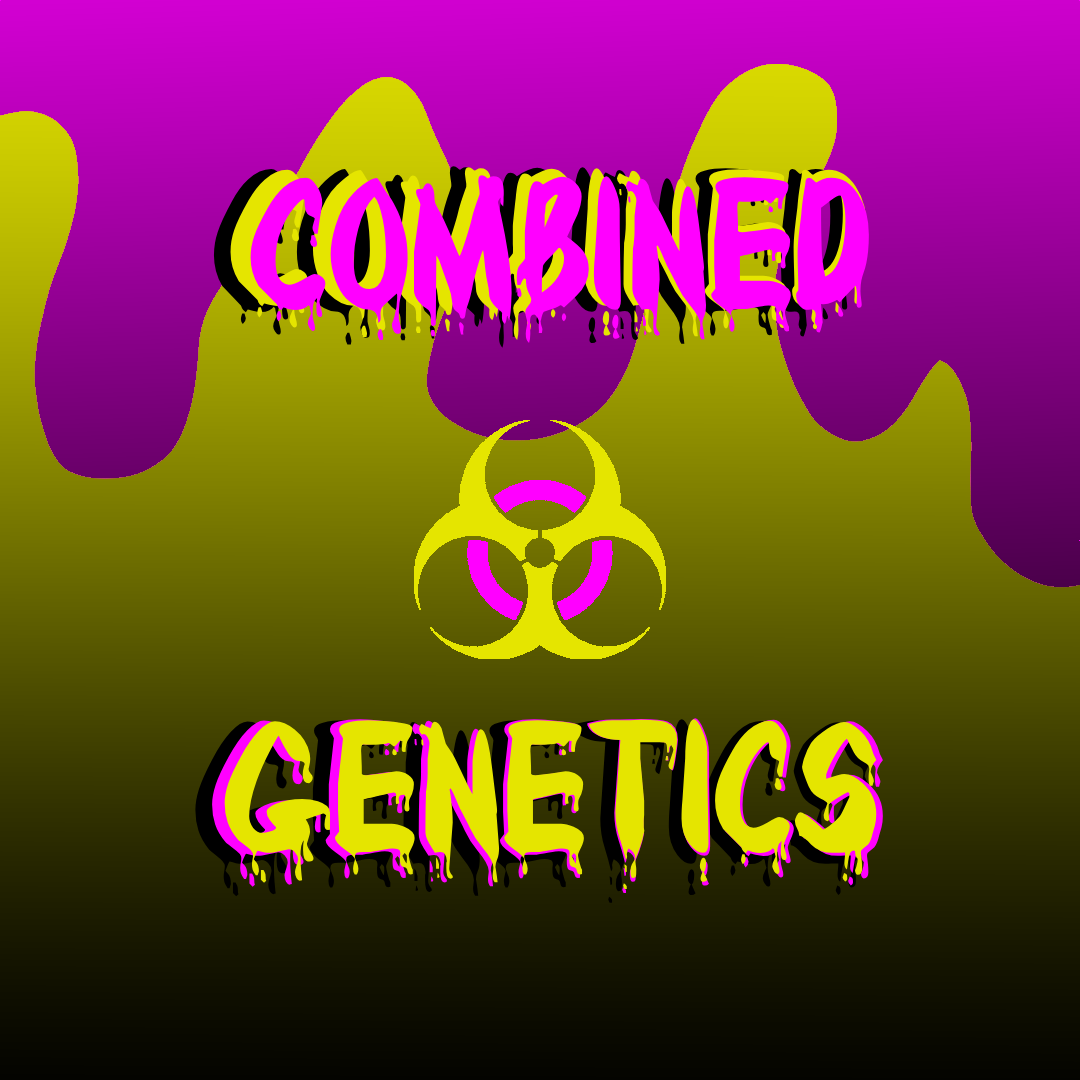
<style>
.page{position:relative;width:1080px;height:1080px}
.page>*{position:absolute;margin:0}
.t1{font:175px "Bloody"}
.t2{font:170px "Bloody";color:#ff00ff}
.t3{font:170px "Bloody";color:#262626}
.t4{font:175px "Bloody";color:#e5e500}
</style>
<div class="page">
<p class="t1" style="left:230px;top:167px;width:637px;height:173px">combined</p>
<p class="t2" style="left:250px;top:175px;width:619px;height:168px"><span class="t3">c</span>ombined</p>
<p class="t4" style="left:212px;top:718px;width:671px;height:175px">genetics</p>
</div>
